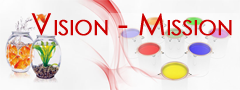
<style>
.page{position:relative;width:240px;height:90px}
.page>*{position:absolute;margin:0}
.t1{font:30px "CenturyGothic";color:#cc0000;font-variant:small-caps;font-weight:bold}
</style>
<div class="page">
<p class="t1" style="left:31px;top:13px;width:201px;height:23px">Vision - Mission</p>
</div>
